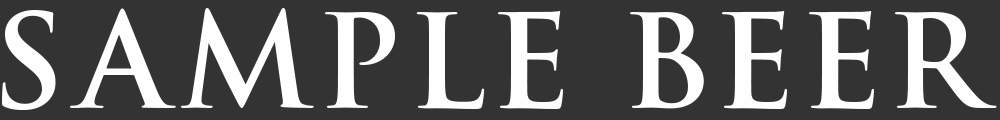
<style>
.page{position:relative;width:1000px;height:120px;background:#333333}
.page>*{position:absolute;margin:0}
.t1{font:128.5px "TrajanPro3-Semibold";letter-spacing:0.05em;color:#fefefe}
</style>
<div class="page">
<p class="t1" style="left:2px;top:8px;width:995px;height:103px">SAMPLE BEER</p>
</div>
